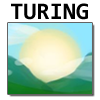
<style>
.page{position:relative;width:100px;height:100px;background:#ffffff}
.page>*{position:absolute;margin:0}
.t1{font:24px "Consolas-Bold";color:#000000}
</style>
<div class="page">
<p class="t1" style="left:11px;top:3px;width:77px;height:17px">TURING</p>
</div>
